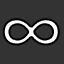
<style>
.page{position:relative;width:64px;height:64px;background:#333333}
.page>*{position:absolute;margin:0}
.t1{font:72px "HKGrotesk-Bold"}
</style>
<div class="page">
<p class="t1" style="left:2px;top:18px;width:58px;height:28px">∞</p>
</div>
